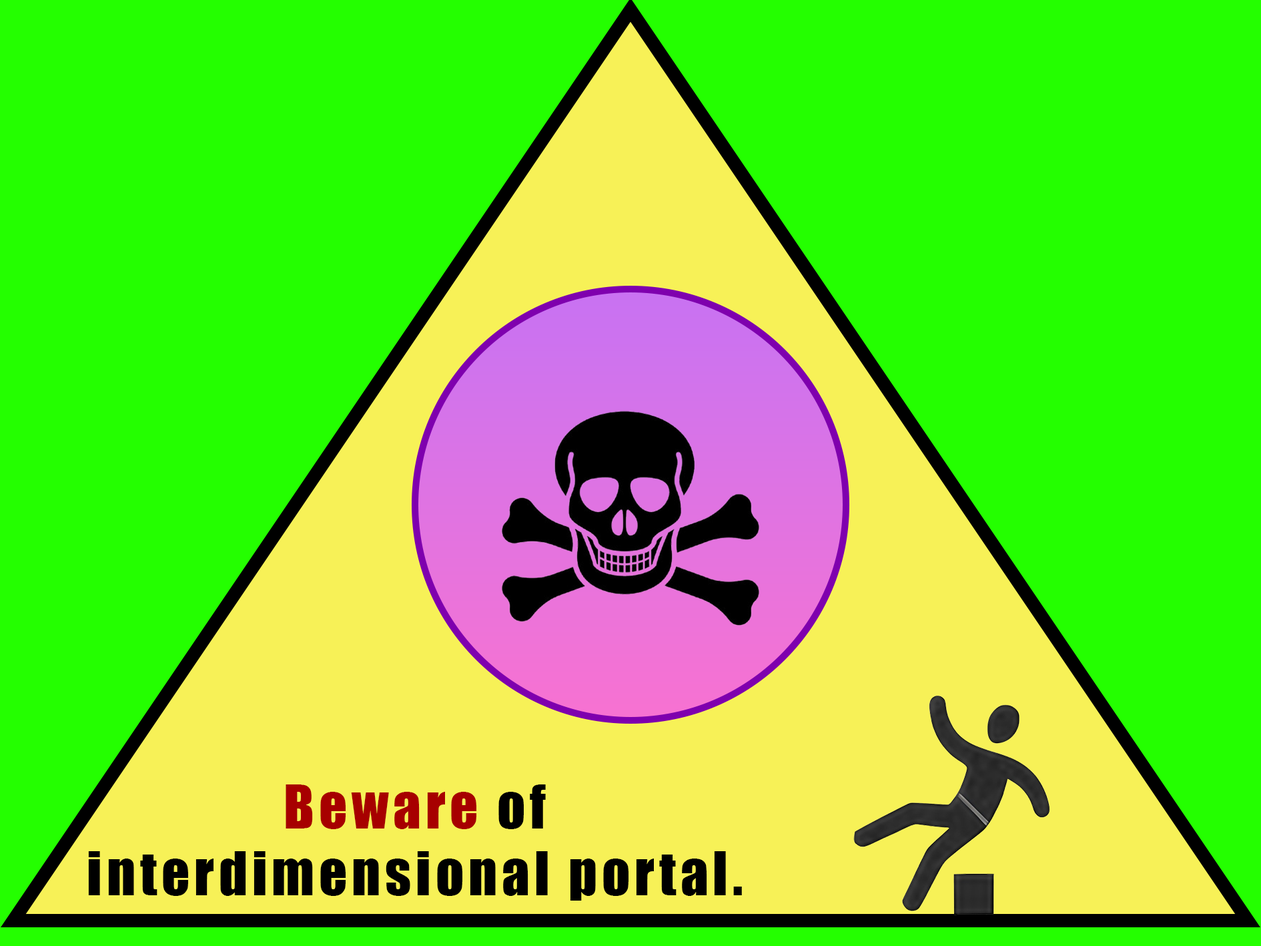
<style>
.page{position:relative;width:1261px;height:946px;background:#24ff00}
.page>*{position:absolute;margin:0}
.t1{font:55.6px "Impact";letter-spacing:0.08em;color:#000000}
.t2{font:55.6px "Impact";letter-spacing:0.08em;color:#a70000}
</style>
<div class="page">
<p class="t1" style="left:88px;top:784px;width:654px;height:116px;text-align:center"><span class="t2">Beware</span> of interdimensional portal.</p>
</div>
